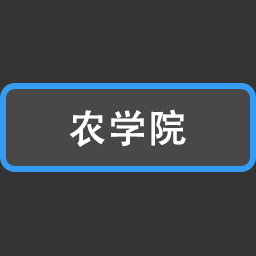
<style>
.page{position:relative;width:256px;height:256px;background:#333333}
.page>*{position:absolute;margin:0}
.t1{font:39px "AdobeHeitiStd-Regular";color:#ffffff;font-weight:bold}
</style>
<div class="page">
<p class="t1" style="left:69px;top:109px;width:117px;height:38px">农学院</p>
</div>
